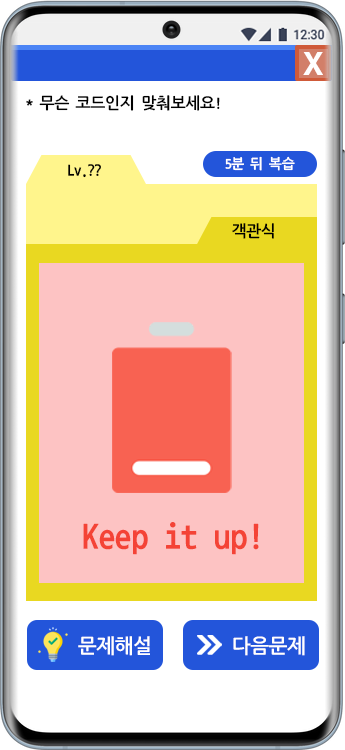
<style>
.page{position:relative;width:345px;height:750px;background:#fdc3c3}
.page>*{position:absolute;margin:0}
.t1{font:30px "H2gtrE";color:#ffffff}
.t2{font:16px "NanumGothicCoding-Bold";letter-spacing:-0.08em;color:#000000}
.t3{font:14px "NanumGothicCoding-Bold";letter-spacing:-0.08em;color:#ffffff}
.t4{font:36px "NanumGothicCoding-Bold";letter-spacing:-0.04em;color:#f44336}
.t5{font:20px "NanumGothicCoding-Bold";letter-spacing:-0.08em;color:#ffffff}
</style>
<div class="page">
<p class="t1" style="left:303px;top:52px;width:20px;height:23px">X</p>
<p class="t2" style="left:26px;top:95px;width:194px;height:16px">* 무슨 코드인지 맞춰보세요!</p>
<p class="t3" style="left:225px;top:156px;width:70px;height:15px">5분 뒤 복습</p>
<p class="t2" style="left:68px;top:164px;width:33px;height:14px">Lv.??</p>
<p class="t2" style="left:232px;top:223px;width:42px;height:16px">객관식</p>
<p class="t4" style="left:83px;top:522px;width:176px;height:33px">Keep it up!</p>
<p class="t5" style="left:78px;top:636px;width:72px;height:20px">문제해설</p>
<p class="t5" style="left:233px;top:636px;width:72px;height:20px">다음문제</p>
</div>
